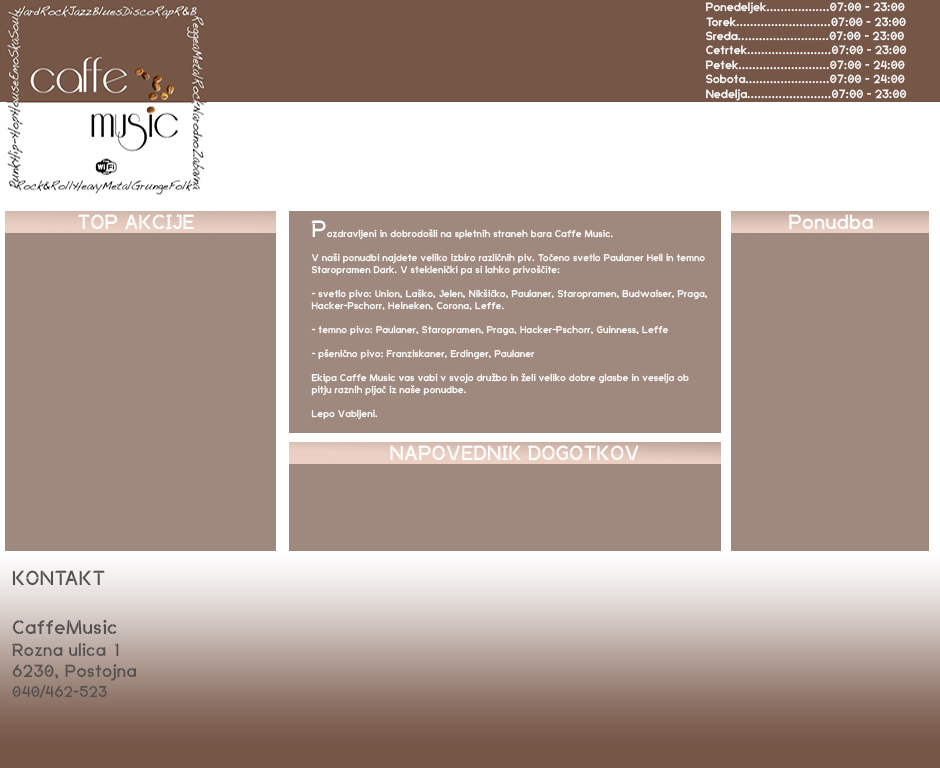
<style>
.page{position:relative;width:940px;height:768px;background:#9f887e}
.page>*{position:absolute;margin:0}
.t1{font:12px "Anklada-Novaz---original";color:#ffffff}
.t2{font:21px "Anklada-Novaz---original";color:#ffffff}
.t3{font:10px "Anklada-Novaz---original";color:#ffffff}
.t4{font:24px "Anklada-Novaz---original";color:#ffffff}
.t5{font:10px "MinionPro-Regular";color:#ffffff}
.t6{font:18px "Anklada-Novaz---original";color:#565151}
.t7{font:21px "Anklada-Novaz---original";color:#565151}
.t8{font:20px "Anklada-Novaz---original";color:#565151}
.t9{font:16px "Anklada-Novaz---original";color:#565151}
</style>
<div class="page">
<p class="t1" style="left:705px;top:2px;width:202px;height:99px">Ponedeljek..................07:00 - 23:00<br>Torek...........................07:00 - 23:00<br>Sreda..........................07:00 - 23:00<br>Cetrtek........................07:00 - 23:00<br>Petek..........................07:00 - 24:00<br>Sobota........................07:00 - 24:00<br>Nedelja........................07:00 - 23:00<br><span class="t2"><br><br><br>Nedelja 08:00 - 23:0</span></p>
<p class="t2" style="left:78px;top:214px;width:116px;height:16px">TOP AKCIJE</p>
<p class="t3" style="left:311px;top:220px;width:396px;height:200px"><span class="t4">P</span>ozdravljeni in dobrodošli na spletnih straneh bara Caffe Music.<br> <br>V naši ponudbi najdete veliko izbiro razli<span class="t5">č</span>nih piv. To<span class="t5">č</span>eno svetlo Paulaner Hell in temno Staropramen Dark. V stekleni<span class="t5">č</span>ki pa si lahko privoš<span class="t5">č</span>ite:<br> <br>- svetlo pivo: Union, Laško, Jelen, Nikši<span class="t5">č</span>ko, Paulaner, Staropramen, Budwaiser, Praga, Hacker-Pschorr, Heineken, Corona, Leffe.<br> <br>- temno pivo: Paulaner, Staropramen, Praga, Hacker-Pschorr, Guinness, Leffe<br> <br>- pšeni<span class="t5">č</span>no pivo: Franziskaner, Erdinger, Paulaner<br> <br>Ekipa Caffe Music vas vabi v svojo družbo in želi veliko dobre glasbe in veselja ob pitju raznih pija<span class="t5">č</span> iz naše ponudbe.<br> <br>Lepo Vabljeni.</p>
<p class="t2" style="left:788px;top:214px;width:85px;height:16px">Ponudba</p>
<p class="t2" style="left:390px;top:445px;width:249px;height:16px">NAPOVEDNIK DOGOTKOV</p>
<p class="t6" style="left:12px;top:570px;width:125px;height:128px"><span class="t7">KONTAKT<br><br></span><span class="t8">CaffeMusic<br></span>Rozna ulica 1<br>6230, Postojna<br><span class="t9">040/462-523</span></p>
</div>
